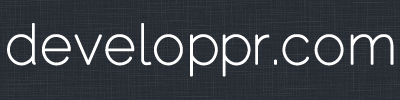
<style>
.page{position:relative;width:400px;height:100px}
.page>*{position:absolute;margin:0}
.t1{font:55px "Raleway-Thin";color:#ffffff;font-weight:bold}
</style>
<div class="page">
<p class="t1" style="left:7px;top:23px;width:387px;height:54px">developpr.com</p>
</div>
